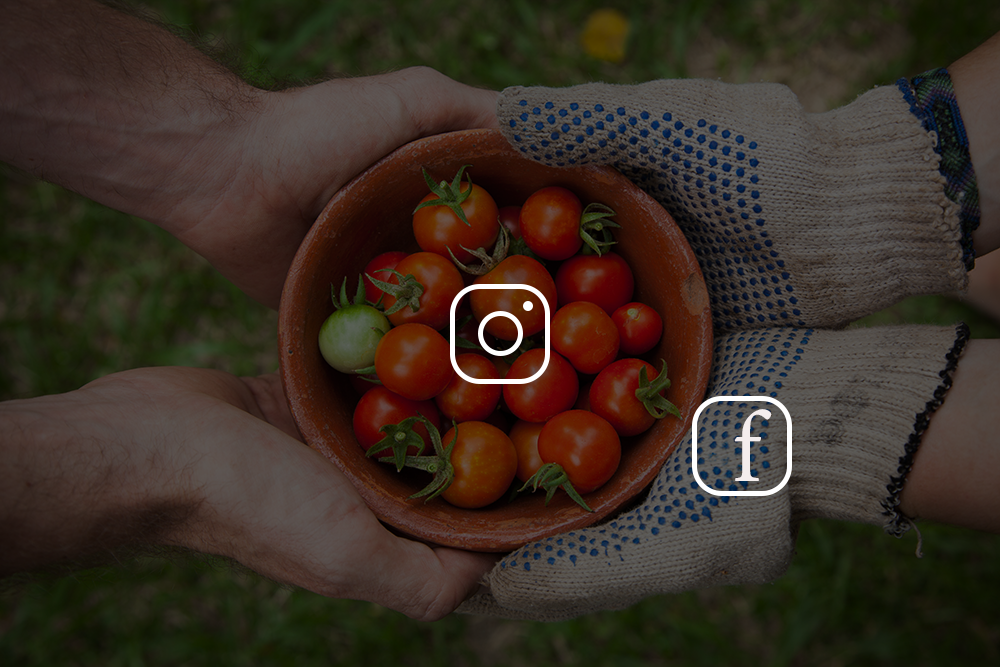
<style>
.page{position:relative;width:1000px;height:667px}
.page>*{position:absolute;margin:0}
.t1{font:100px "MinionVariableConcept-Roman";color:#f4eded}
</style>
<div class="page">
<p class="t1" style="left:734px;top:409px;width:38px;height:72px">f</p>
</div>
